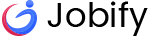
<style>
.page{position:relative;width:149px;height:36px;background:#ffffff}
.page>*{position:absolute;margin:0}
.t1{font:34px "Poppins-Regular";color:#000000}
</style>
<div class="page">
<p class="t1" style="left:47px;top:1px;width:101px;height:35px">Jobify</p>
</div>
